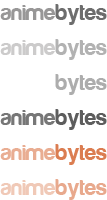
<style>
.page{position:relative;width:107px;height:200px;background:#ffffff}
.page>*{position:absolute;margin:0}
.t1{font:23px "Harabara";color:#989797}
.t2{font:23px "Harabara";color:#6d6d6d}
.t3{font:23px "Harabara";color:#cccbcb}
.t4{font:23px "Harabara";color:#b2b2b2}
.t5{font:23px "Harabara";color:#ffffff}
.t6{font:23px "Harabara";color:#adadad}
.t7{font:23px "Harabara";color:#777777}
.t8{font:23px "Harabara";color:#5d5d5d}
.t9{font:23px "Harabara";color:#e9ad92}
.t10{font:23px "Harabara";color:#db7d51}
.t11{font:23px "Harabara";color:#f0c9b7}
.t12{font:23px "Harabara";color:#e8a98d}
</style>
<div class="page">
<p class="t1" style="left:0px;top:4px;width:107px;height:21px">anime<span class="t2">bytes</span></p>
<p class="t3" style="left:0px;top:39px;width:107px;height:21px">anime<span class="t4">bytes</span></p>
<p class="t5" style="left:0px;top:74px;width:107px;height:21px">anime<span class="t6">bytes</span></p>
<p class="t7" style="left:0px;top:109px;width:107px;height:21px">anime<span class="t8">bytes</span></p>
<p class="t9" style="left:0px;top:144px;width:107px;height:21px">anime<span class="t10">bytes</span></p>
<p class="t11" style="left:0px;top:179px;width:107px;height:21px">anime<span class="t12">bytes</span></p>
</div>
